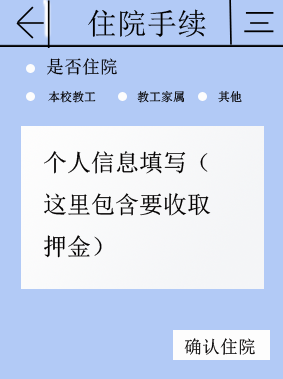
<style>
.page{position:relative;width:283px;height:379px;background:#b2caf6}
.page>*{position:absolute;margin:0}
.t1{font:30.1px "SimSun";color:#000000}
.t2{font:18px "SimSun";color:#020000}
.t3{font:12px "SimSun"}
.t4{font:24px "SimSun";color:#020000}
</style>
<div class="page">
<p class="t1" style="left:88px;top:9px;width:118px;height:28px">住院手续</p>
<p class="t2" style="left:47px;top:58px;width:70px;height:17px">是否住院</p>
<p class="t3" style="left:48px;top:91px;width:48px;height:12px">本校教工</p>
<p class="t3" style="left:137px;top:91px;width:47px;height:12px">教工家属</p>
<p class="t3" style="left:218px;top:91px;width:24px;height:12px">其他</p>
<p class="t4" style="left:44px;top:151px;width:167px;height:107px">个人信息填写（<br>这里包含要收取<br>押金）</p>
<p class="t2" style="left:184px;top:338px;width:71px;height:17px">确认住院</p>
</div>
